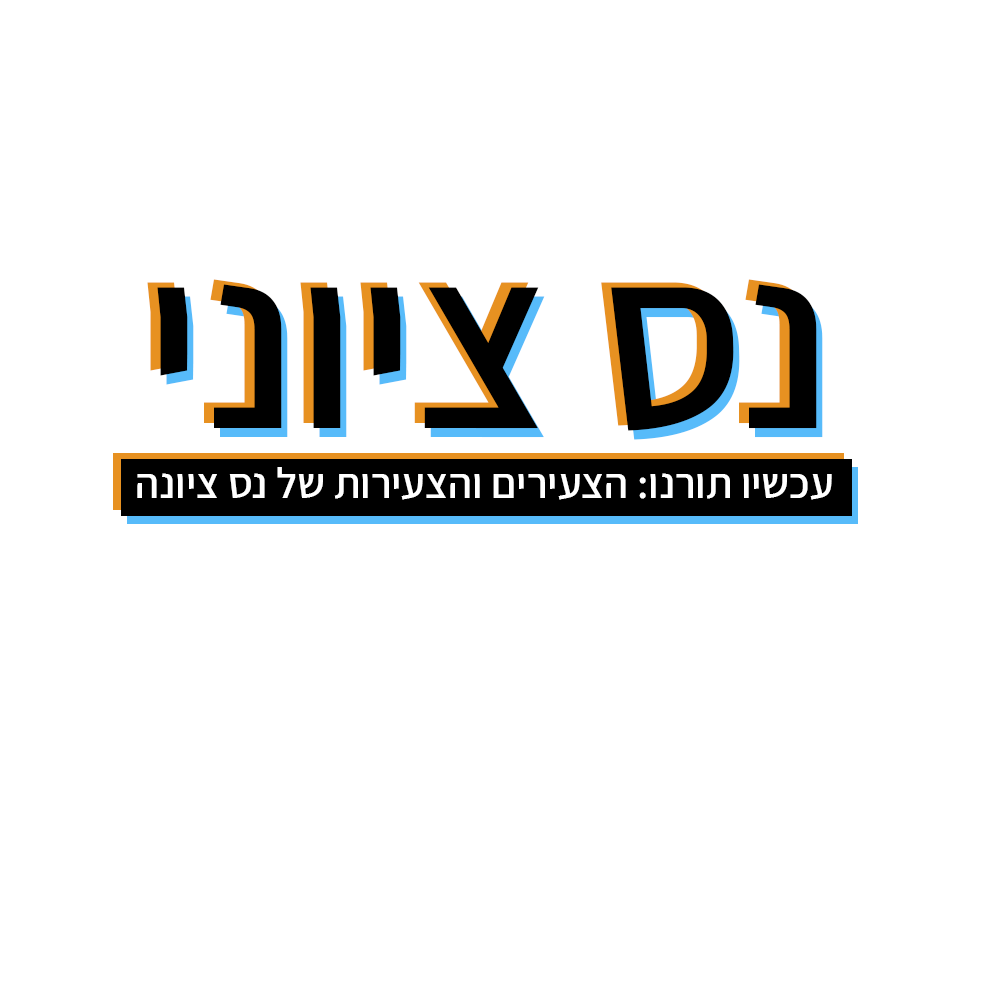
<style>
.page{position:relative;width:981px;height:981px;background:#ffffff}
.page>*{position:absolute;margin:0}
.t1{font:250px "Assistant-SemiBold"}
.t2{font:250px "Assistant-SemiBold";color:#000000}
.t3{font:43px "Assistant-SemiBold";color:#ffffff}
</style>
<div class="page">
<p class="t1" style="left:147px;top:279px;width:660px;height:147px">נס ציוני</p>
<p class="t2" style="left:157px;top:284px;width:660px;height:147px">נס ציוני</p>
<p class="t2" style="left:163px;top:293px;width:660px;height:147px">נס ציוני</p>
<p class="t3" style="left:137px;top:467px;width:695px;height:33px">עכשיו תורנו: הצעירים והצעירות של נס ציונה</p>
</div>
